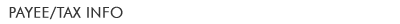
<style>
.page{position:relative;width:400px;height:24px;background:#ffffff}
.page>*{position:absolute;margin:0}
.t1{font:14.7px "FuturaBT-Light";letter-spacing:0.025em;color:#363636;text-transform:uppercase;font-weight:bold}
</style>
<div class="page">
<p class="t1" style="left:9px;top:6px;width:114px;height:14px">PAYEE/TAX INFO</p>
</div>
